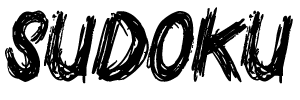
<style>
.page{position:relative;width:300px;height:100px;background:#ffffff}
.page>*{position:absolute;margin:0}
.t1{font:101px "Devastated";color:#000000}
</style>
<div class="page">
<p class="t1" style="left:5px;top:7px;width:288px;height:77px">SUDOKU</p>
</div>
